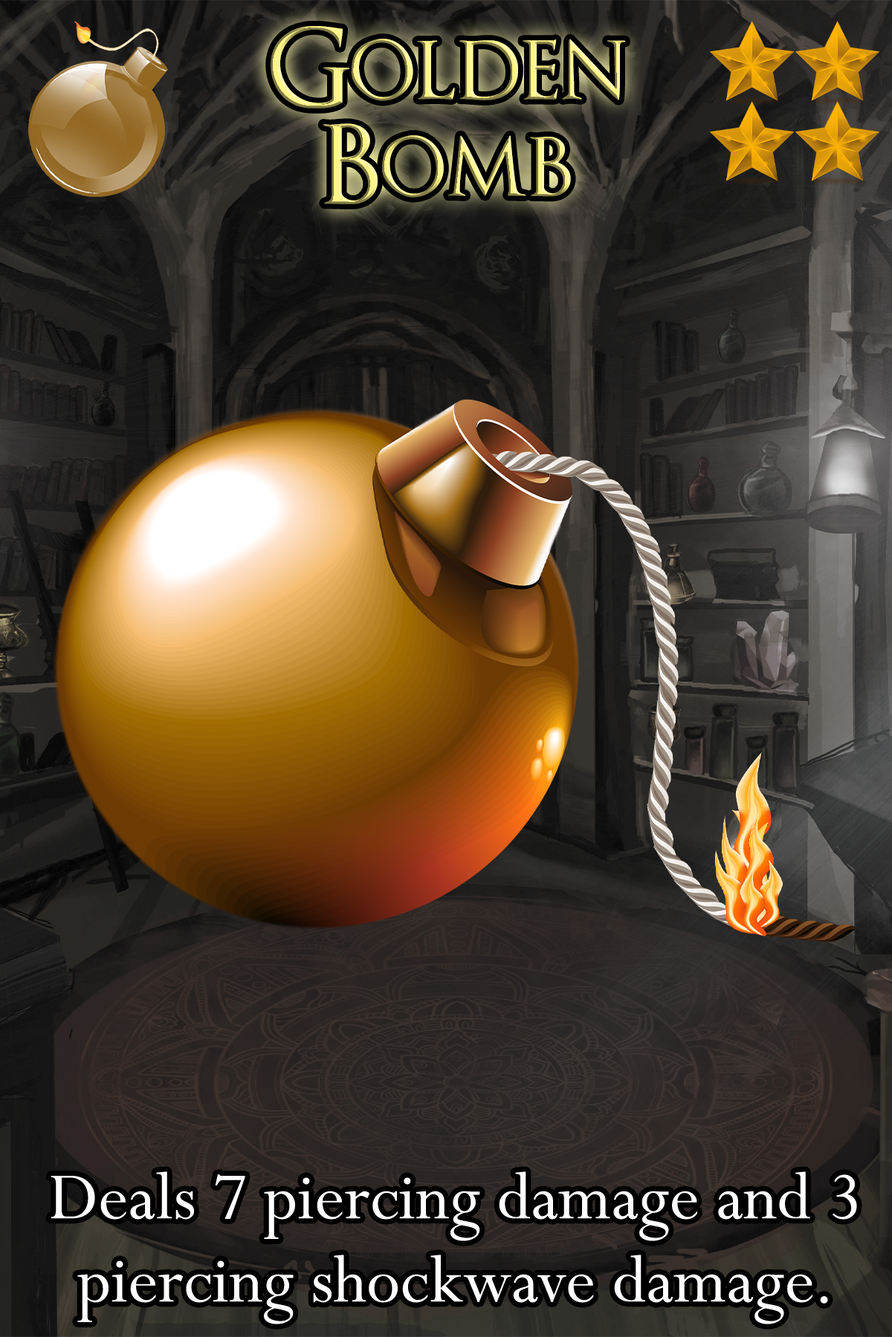
<style>
.page{position:relative;width:892px;height:1337px}
.page>*{position:absolute;margin:0}
.t1{font:183.5px/96.6px "OptimusPrinceps"}
.t2{font:127.1px "Perpetua";color:#ffffff}
</style>
<div class="page">
<p class="t1" style="left:270px;top:26px;width:356px;height:178px;text-align:center">Golden<br>Bomb</p>
<p class="t2" style="left:51px;top:1172px;width:806px;height:153px">Deals 7 piercing damage and 3 piercing shockwave damage.</p>
</div>
